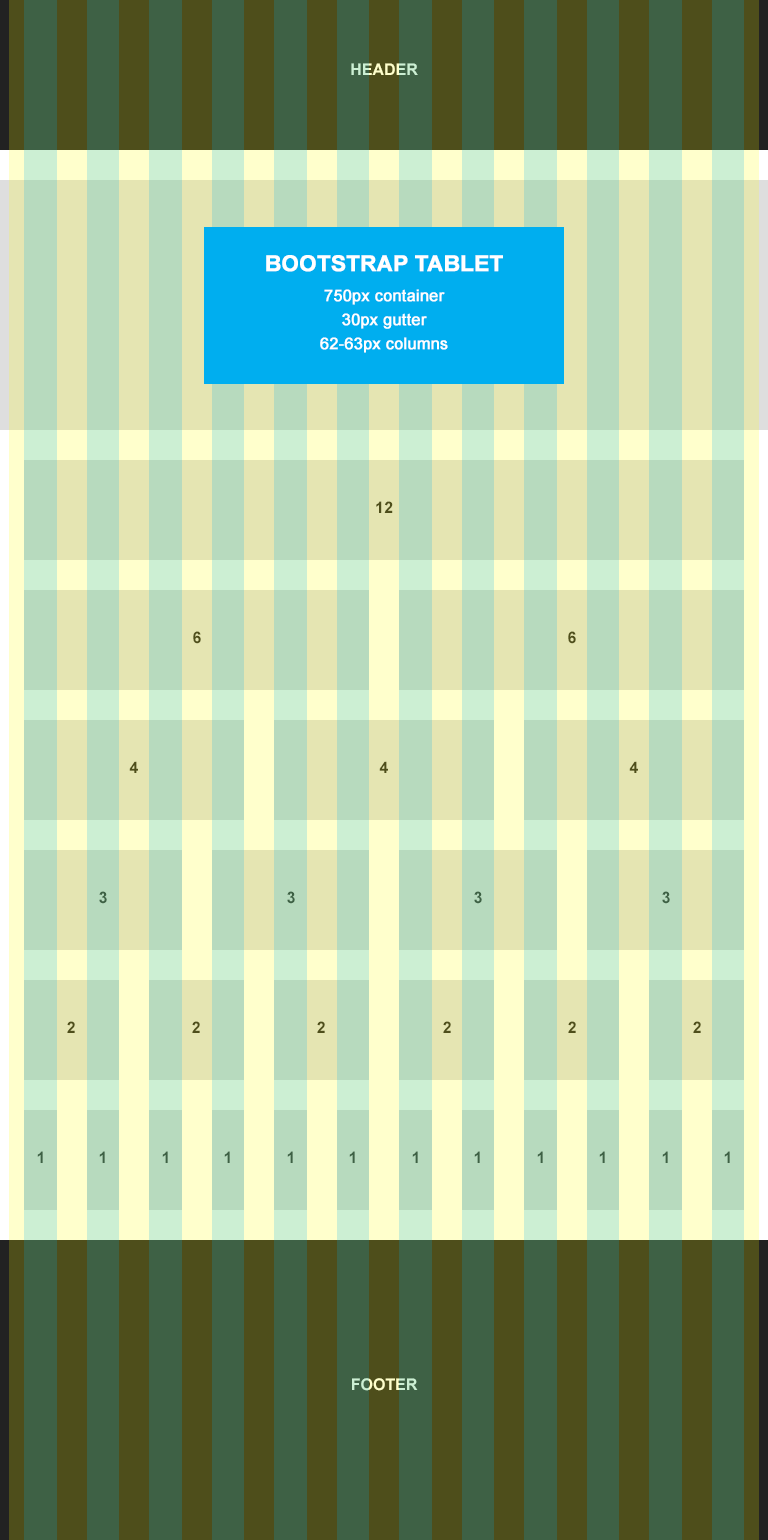
<style>
.page{position:relative;width:768px;height:1540px;background:#b7dabe}
.page>*{position:absolute;margin:0}
.t1{font:16px "Arial-BoldMT";text-transform:uppercase}
.t2{font:16px/24px "ArialMT";color:#ffffff;font-weight:bold}
.t3{font:22px/24px "Arial-BoldMT";color:#ffffff;text-transform:uppercase;font-weight:bold}
.t4{font:16px/30px "ArialMT";color:#ffffff;font-weight:bold}
.t5{font:16px "Arial-BoldMT";color:#4e4e1b;text-transform:uppercase}
.t6{font:16px "Arial-BoldMT";color:#3e6145;text-transform:uppercase}
</style>
<div class="page">
<p class="t1" style="left:351px;top:63px;width:67px;height:12px">header</p>
<p class="t2" style="left:266px;top:255px;width:237px;height:98px;text-align:center"><span class="t3">Bootstrap tablet<br></span><span class="t4">750px container<br></span>30px gutter<br>62-63px columns</p>
<p class="t5" style="left:376px;top:501px;width:17px;height:12px">12</p>
<p class="t5" style="left:193px;top:631px;width:8px;height:13px">6</p>
<p class="t5" style="left:568px;top:631px;width:8px;height:13px">6</p>
<p class="t5" style="left:129px;top:761px;width:9px;height:12px">4</p>
<p class="t5" style="left:379px;top:761px;width:9px;height:12px">4</p>
<p class="t5" style="left:629px;top:761px;width:9px;height:12px">4</p>
<p class="t6" style="left:99px;top:891px;width:8px;height:13px">3</p>
<p class="t6" style="left:287px;top:891px;width:8px;height:13px">3</p>
<p class="t6" style="left:474px;top:891px;width:8px;height:13px">3</p>
<p class="t6" style="left:662px;top:891px;width:8px;height:13px">3</p>
<p class="t5" style="left:67px;top:1021px;width:8px;height:12px">2</p>
<p class="t5" style="left:192px;top:1021px;width:8px;height:12px">2</p>
<p class="t5" style="left:317px;top:1021px;width:8px;height:12px">2</p>
<p class="t5" style="left:443px;top:1021px;width:8px;height:12px">2</p>
<p class="t5" style="left:568px;top:1021px;width:8px;height:12px">2</p>
<p class="t5" style="left:693px;top:1021px;width:8px;height:12px">2</p>
<p class="t6" style="left:37px;top:1151px;width:6px;height:12px">1</p>
<p class="t6" style="left:99px;top:1151px;width:6px;height:12px">1</p>
<p class="t6" style="left:162px;top:1151px;width:6px;height:12px">1</p>
<p class="t6" style="left:224px;top:1151px;width:6px;height:12px">1</p>
<p class="t6" style="left:287px;top:1151px;width:6px;height:12px">1</p>
<p class="t6" style="left:349px;top:1151px;width:6px;height:12px">1</p>
<p class="t6" style="left:412px;top:1151px;width:6px;height:12px">1</p>
<p class="t6" style="left:474px;top:1151px;width:6px;height:12px">1</p>
<p class="t6" style="left:537px;top:1151px;width:6px;height:12px">1</p>
<p class="t6" style="left:599px;top:1151px;width:6px;height:12px">1</p>
<p class="t6" style="left:662px;top:1151px;width:6px;height:12px">1</p>
<p class="t6" style="left:724px;top:1151px;width:6px;height:12px">1</p>
<p class="t1" style="left:352px;top:1378px;width:66px;height:13px">footer</p>
</div>
